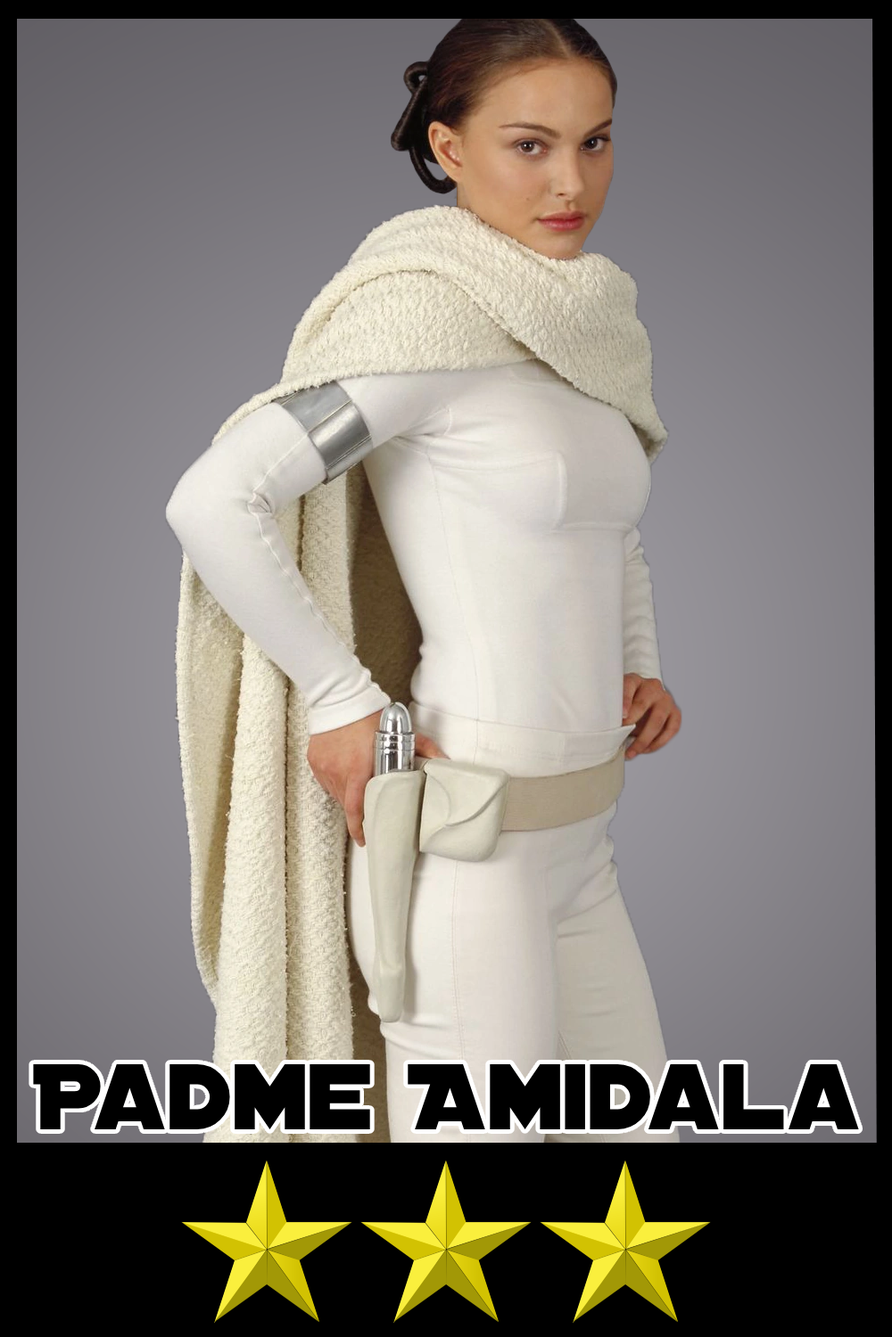
<style>
.page{position:relative;width:892px;height:1337px}
.page>*{position:absolute;margin:0}
.t1{font:100px "DistantGalaxy";color:#000000}
</style>
<div class="page">
<p class="t1" style="left:33px;top:1065px;width:826px;height:65px">Padme Amidala</p>
</div>
